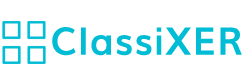
<style>
.page{position:relative;width:250px;height:80px;background:#ffffff}
.page>*{position:absolute;margin:0}
.t1{font:38px "Muli-Bold";letter-spacing:0.035em;color:#00bcd4}
</style>
<div class="page">
<p class="t1" style="left:52px;top:27px;width:190px;height:29px">ClassiXER</p>
</div>
